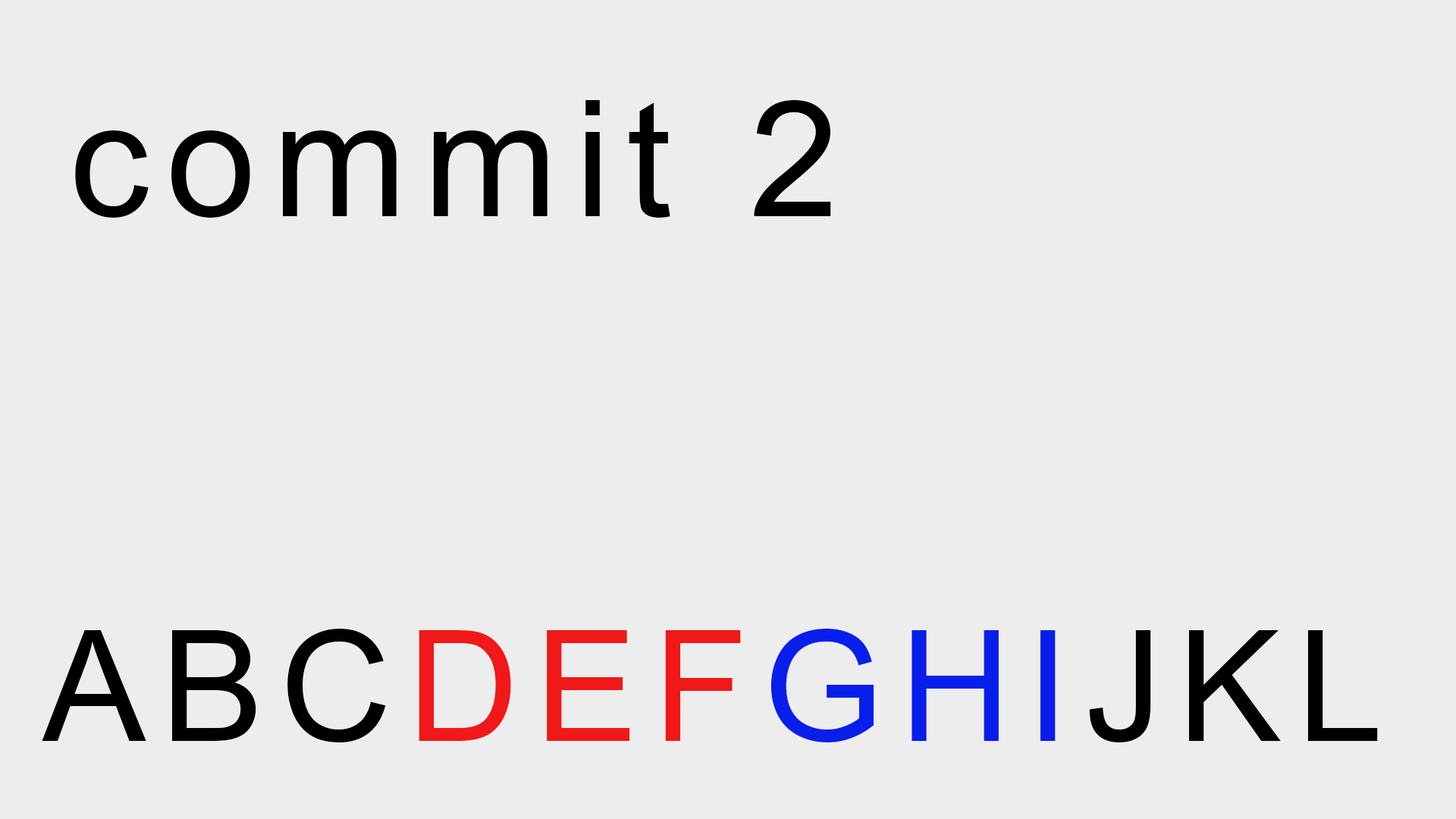
<style>
.page{position:relative;width:1456px;height:819px;background:#ededed}
.page>*{position:absolute;margin:0}
.t1{font:161.9px "ArialMT";letter-spacing:0.1em;color:#000000}
.t2{font:154.8px "ArialMT";letter-spacing:0.1em;color:#000000}
.t3{font:154.8px "ArialMT";letter-spacing:0.1em;color:#f01818}
.t4{font:154.8px "ArialMT";letter-spacing:0.1em;color:#081eeb}
</style>
<div class="page">
<p class="t1" style="left:75px;top:100px;width:756px;height:118px">commit 2</p>
<p class="t2" style="left:42px;top:629px;width:1336px;height:113px">ABC<span class="t3">DEF</span><span class="t4">GHI</span>JKL</p>
</div>
